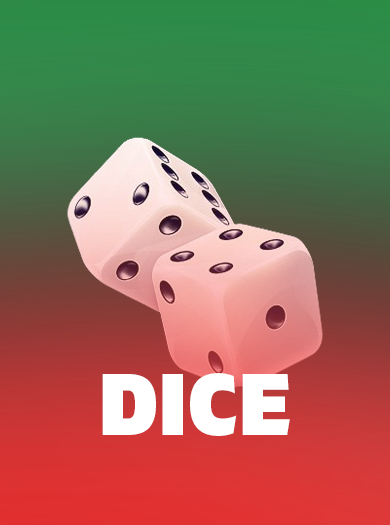
<style>
.page{position:relative;width:390px;height:525px}
.page>*{position:absolute;margin:0}
.t1{font:87.7px "Gilam-BlackDEMO";color:#ffffff}
</style>
<div class="page">
<p class="t1" style="left:102px;top:373px;width:188px;height:63px">DICE</p>
</div>
